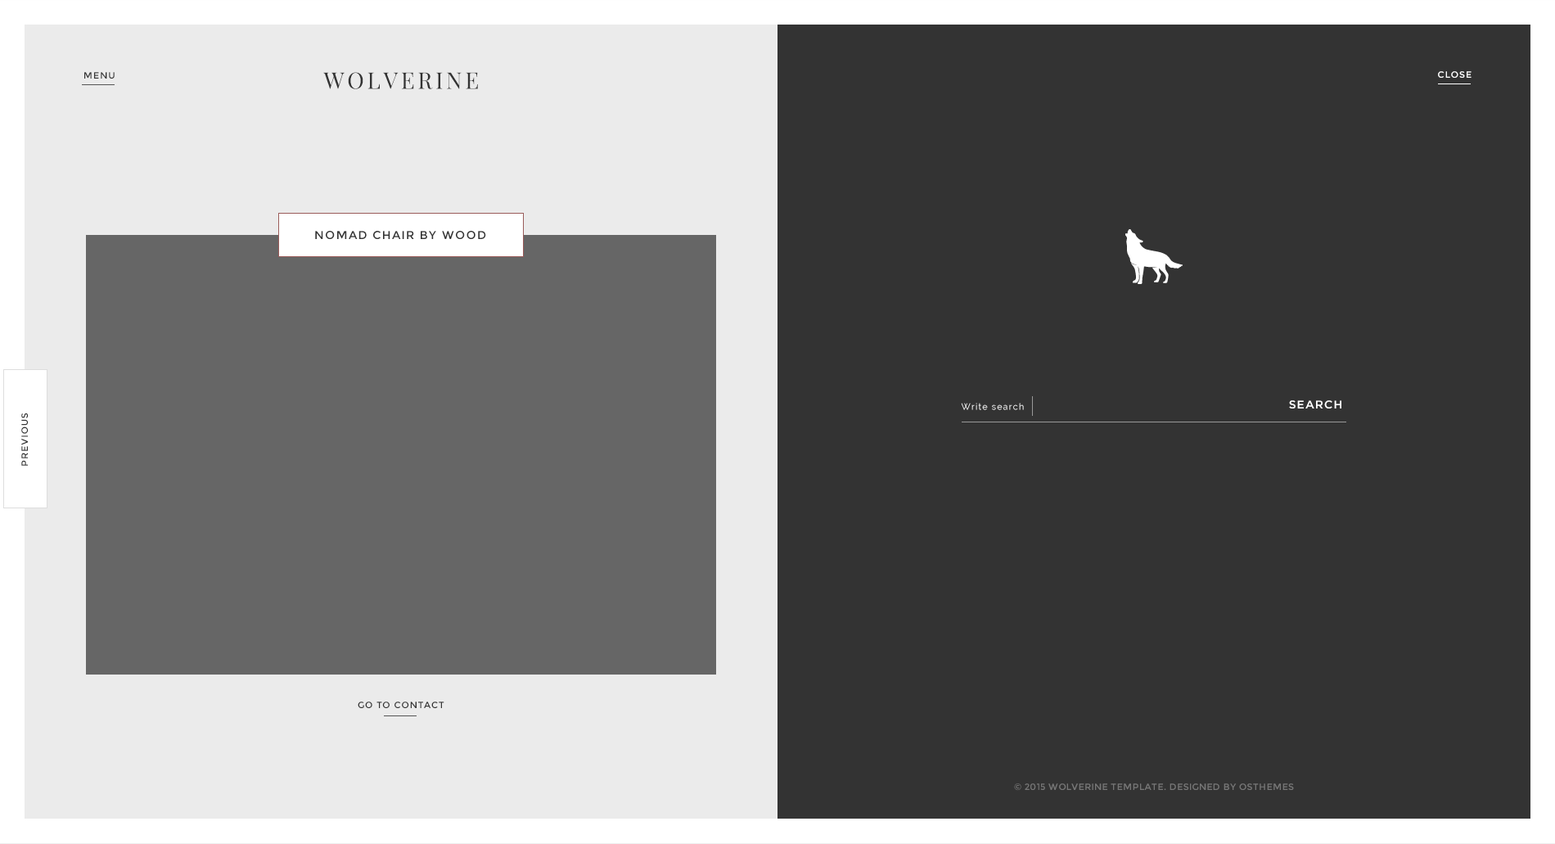
<style>
.page{position:relative;width:1555px;height:844px;background:#333333}
.page>*{position:absolute;margin:0}
.t1{font:9px "Montserrat-Regular";letter-spacing:0.1em;color:#333333}
.t2{font:22.7px "PlayfairDisplay-Regular";letter-spacing:0.1em;color:#333333}
.t3{font:9px "Montserrat-Regular";letter-spacing:0.1em;color:#ffffff}
.t4{font:11.5px "Montserrat-Regular";letter-spacing:0.1em;color:#333333}
.t5{font:11.3px "Montserrat-Regular";letter-spacing:0.1em;color:#ffffff}
.t6{font:8.8px "Raleway";letter-spacing:0.1em;color:#ffffff}
.t7{font:9px "Montserrat-Regular";letter-spacing:0.04em;color:#777777}
</style>
<div class="page">
<p class="t1" style="left:84px;top:72px;width:31px;height:7px">MENU</p>
<p class="t2" style="left:323px;top:72px;width:155px;height:17px">WOLVERINE</p>
<p class="t3" style="left:1438px;top:71px;width:33px;height:7px">CLOSE</p>
<p class="t4" style="left:315px;top:231px;width:171px;height:8px">NOMAD CHAIR BY WOOD</p>
<p class="t5" style="left:1289px;top:400px;width:52px;height:8px">SEARCH</p>
<p class="t1" style="left:21px;top:412px;width:7px;height:54px;rotate:-90deg">PREVIOUS</p>
<p class="t6" style="left:961px;top:403px;width:63px;height:7px">Write search</p>
<p class="t1" style="left:358px;top:701px;width:86px;height:7px">GO TO CONTACT</p>
<p class="t7" style="left:1014px;top:783px;width:280px;height:7px">© 2015 WOLVERINE TEMPLATE. DESIGNED BY OSTHEMES</p>
</div>
